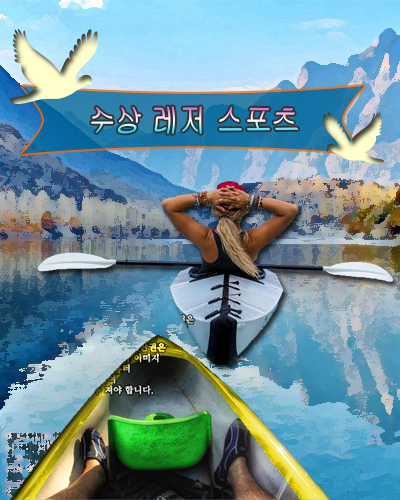
<style>
.page{position:relative;width:400px;height:500px}
.page>*{position:absolute;margin:0}
.t1{font:30px "Gulim"}
</style>
<div class="page">
<p class="t1" style="left:91px;top:106px;width:208px;height:28px">수상 레저 스포츠</p>
</div>
